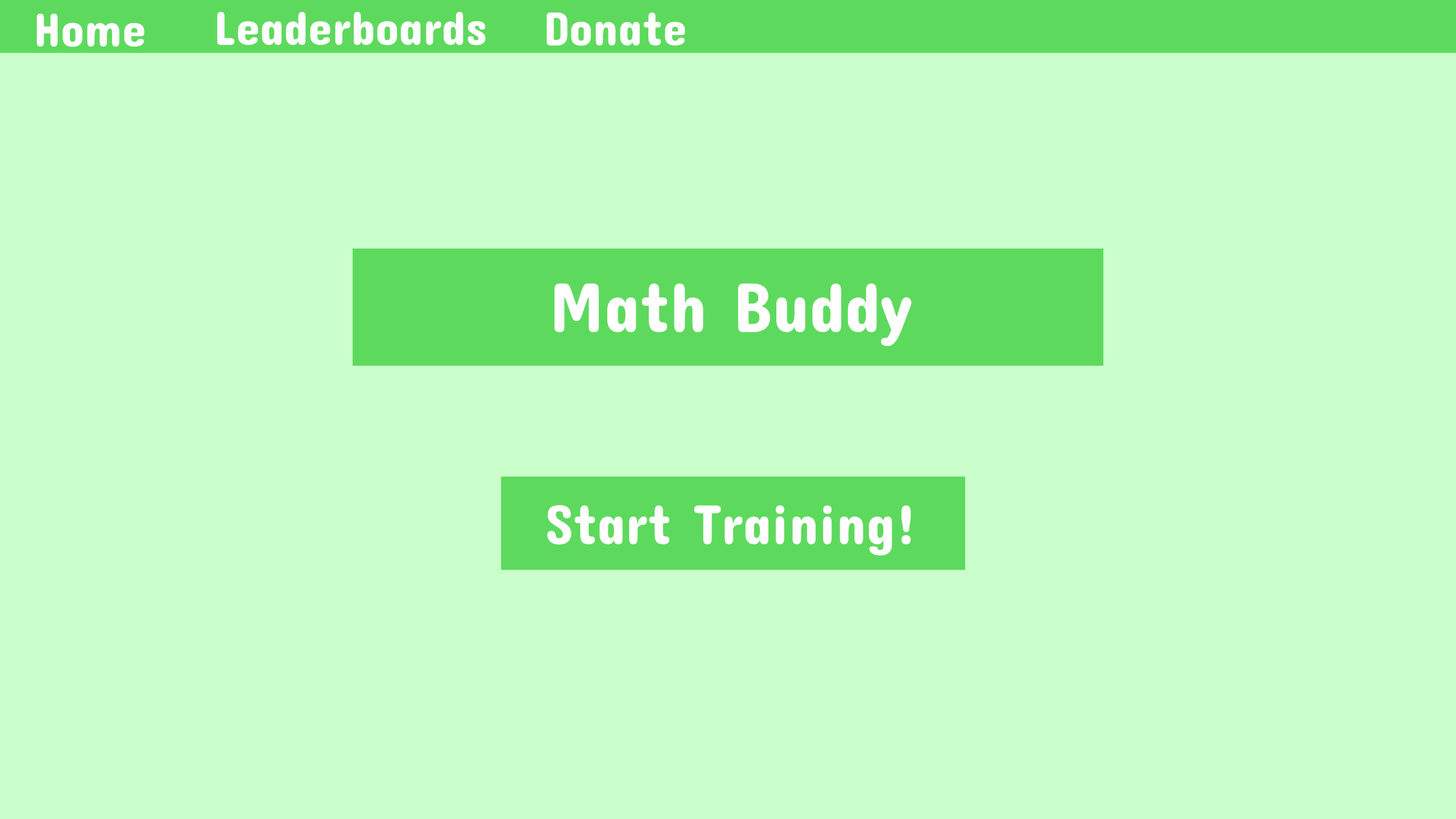
<style>
.page{position:relative;width:1456px;height:819px;background:#caffcb}
.page>*{position:absolute;margin:0}
.t1{font:48.3px "ConcertOne-Regular";color:#ffffff}
.t2{font:71.1px "ConcertOne-Regular";color:#ffffff}
.t3{font:56.9px "ConcertOne-Regular";color:#ffffff}
</style>
<div class="page">
<p class="t1" style="left:36px;top:13px;width:108px;height:34px">Home</p>
<p class="t1" style="left:217px;top:11px;width:269px;height:34px">Leaderboards</p>
<p class="t1" style="left:547px;top:12px;width:138px;height:34px">Donate</p>
<p class="t2" style="left:554px;top:283px;width:358px;height:63px">Math Buddy</p>
<p class="t3" style="left:547px;top:505px;width:364px;height:51px">Start Training!</p>
</div>
